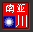
<style>
.page{position:relative;width:33px;height:32px;background:#f20000}
.page>*{position:absolute;margin:0}
.t1{font:10.4px "SimSun";color:#ffffff}
.t2{font:11.7px "SimSun";color:#ffffff}
</style>
<div class="page">
<p class="t1" style="left:6px;top:4px;width:19px;height:9px">南亚</p>
<p class="t2" style="left:16px;top:15px;width:11px;height:12px">川</p>
</div>
